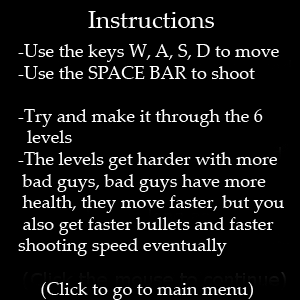
<style>
.page{position:relative;width:300px;height:300px;background:#000000}
.page>*{position:absolute;margin:0}
.t1{font:24px "PalatinoLinotype-Roman";color:#ffffff}
.t2{font:18px "PalatinoLinotype-Roman";color:#ffffff}
</style>
<div class="page">
<p class="t1" style="left:88px;top:11px;width:126px;height:17px">Instructions</p>
<p class="t2" style="left:18px;top:44px;width:266px;height:256px">-Use the keys W, A, S, D to move<br>-Use the SPACE BAR to shoot<br><br>-Try and make it through the 6<br>  levels <br>-The levels get harder with more<br> bad guys, bad guys have more<br> health, they move faster, but you<br> also get faster bullets and faster <br>shooting speed eventually<br><br>     (Click to go to main menu)</p>
</div>
